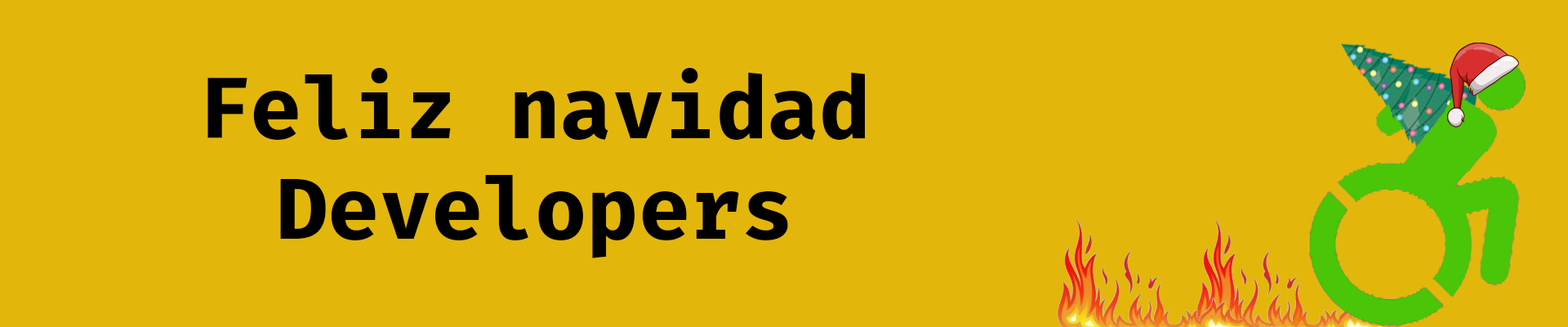
<style>
.page{position:relative;width:1568px;height:327px;background:#e3b60c}
.page>*{position:absolute;margin:0}
.t1{font:84.1px "FiraCode-Bold";color:#000000}
</style>
<div class="page">
<p class="t1" style="left:207px;top:68px;width:658px;height:190px;text-align:center">Feliz navidad <br>Developers</p>
</div>
